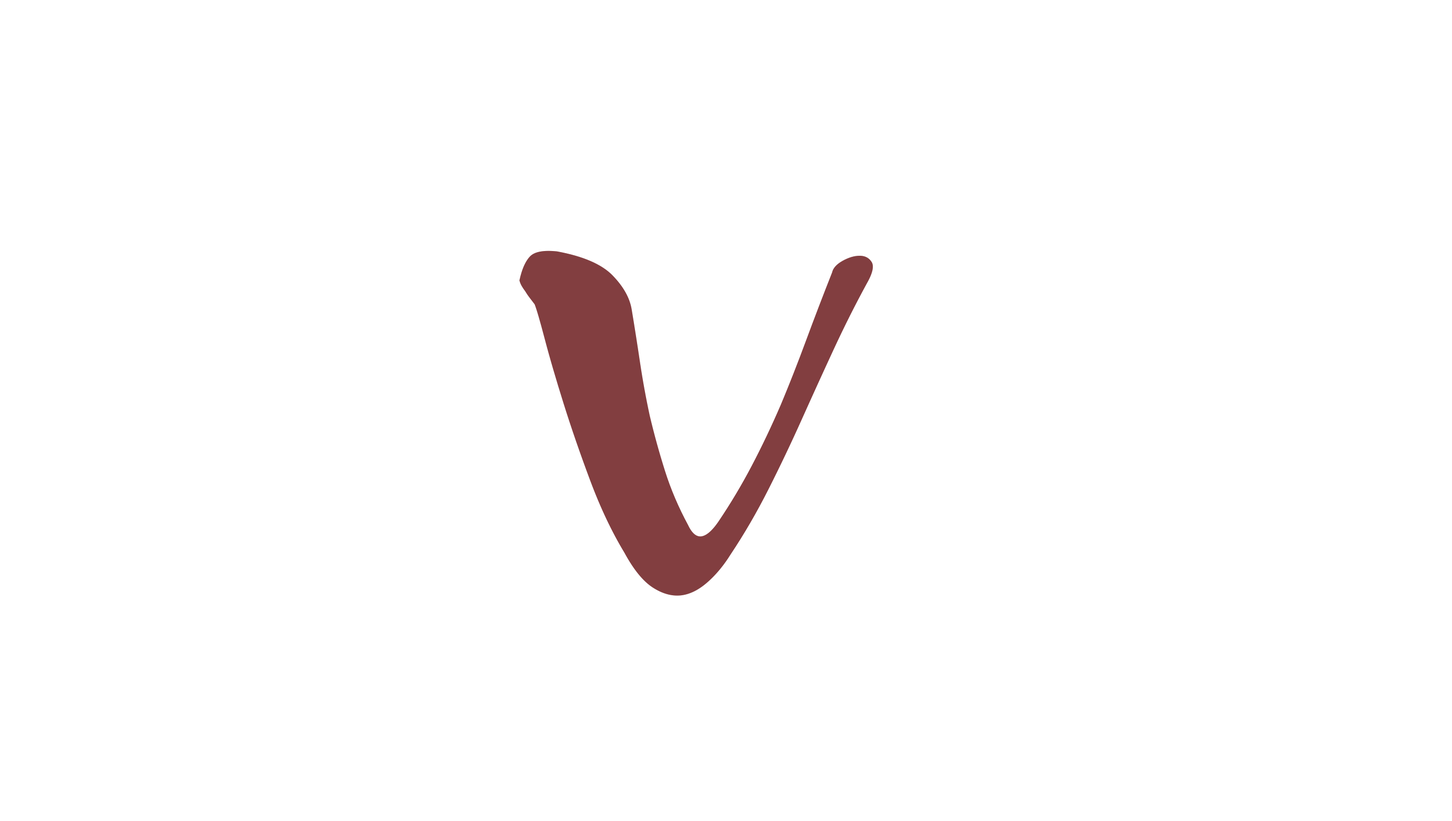
<style>
.page{position:relative;width:1452px;height:821px;background:#ffffff}
.page>*{position:absolute;margin:0}
.t1{font:724px "Yj-DOOLGI-Medium";color:#833e40}
</style>
<div class="page">
<p class="t1" style="left:519px;top:250px;width:355px;height:346px">v</p>
</div>
